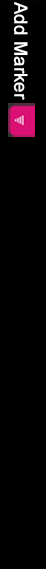
<style>
.page{position:relative;width:46px;height:569px;background:#010000}
.page>*{position:absolute;margin:0}
.t1{font:18px "ArialMT";color:#ffffff;font-weight:bold}
</style>
<div class="page">
<p class="t1" style="left:13px;top:2px;width:15px;height:98px;rotate:90deg">Add Marker</p>
</div>
